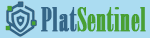
<style>
.page{position:relative;width:150px;height:38px;background:#abdcf1}
.page>*{position:absolute;margin:0}
.t1{font:32px "BodoniMTPosterCompressed";color:#49a033;font-weight:bold}
.t2{font:32px "BodoniMTPosterCompressed";color:#346688;font-weight:bold}
</style>
<div class="page">
<p class="t1" style="left:41px;top:7px;width:105px;height:25px"><span class="t2">Plat</span>Sentinel</p>
</div>
